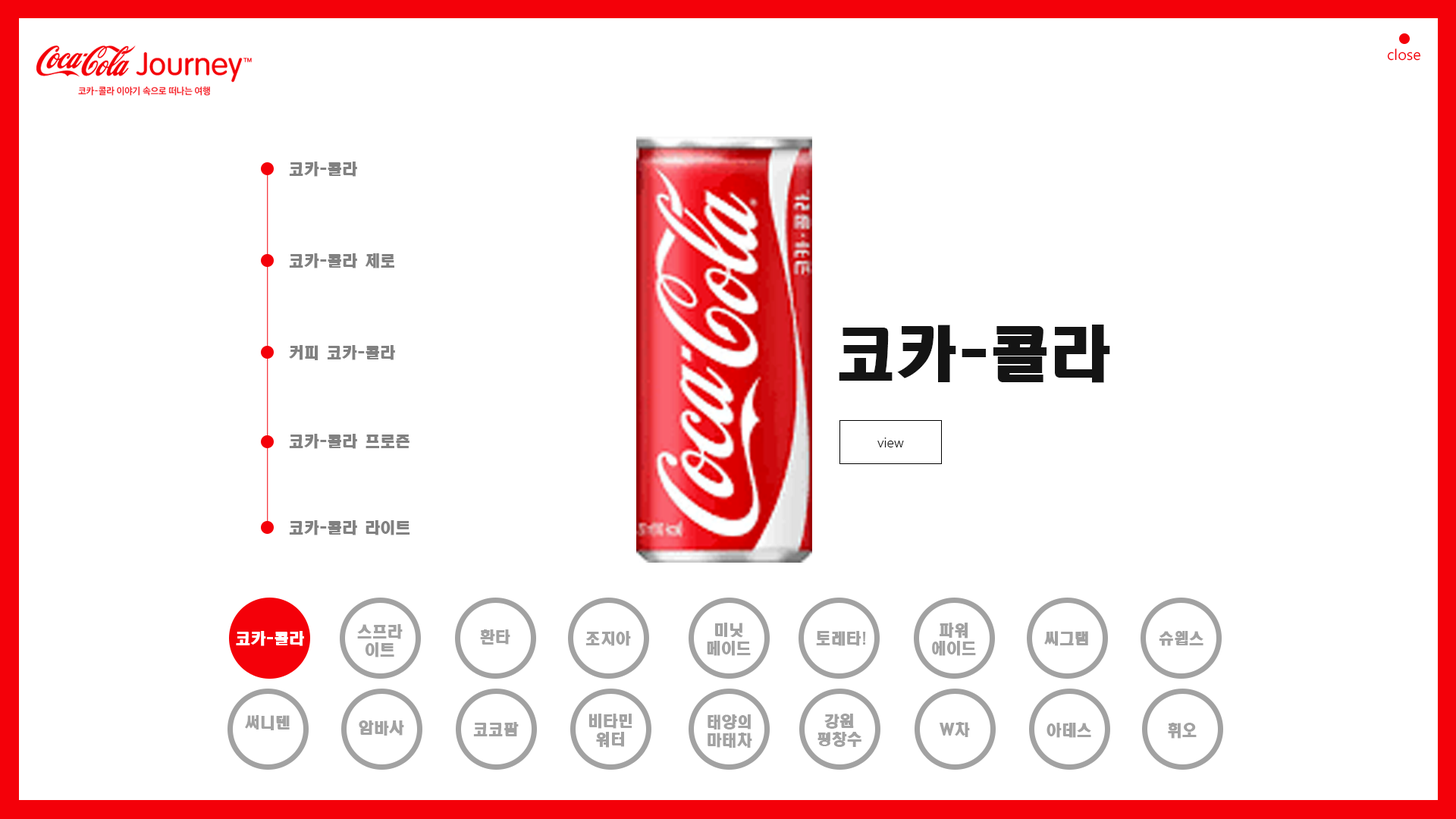
<style>
.page{position:relative;width:1456px;height:819px;background:#ffffff}
.page>*{position:absolute;margin:0}
.t1{font:15.2px "MicrosoftPhagsPa";color:#f40009}
.t2{font:15.2px "HeadlineR-HM";color:#818181}
.t3{font:60.7px "HeadlineR-HM";color:#141414}
.t4{font:13.6px "MalgunGothic-Semilight";color:#141414}
.t5{font:15.2px/18.2px "HeadlineR-HM";color:#a2a2a2}
.t6{font:15.2px "HeadlineR-HM";color:#a2a2a2}
.t7{font:15.2px "HeadlineR-HM";color:#ffffff}
</style>
<div class="page">
<p class="t1" style="left:1387px;top:49px;width:34px;height:12px">close</p>
<p class="t2" style="left:289px;top:162px;width:68px;height:15px">코카-콜라</p>
<p class="t2" style="left:289px;top:253px;width:105px;height:15px">코카-콜라 제로</p>
<p class="t3" style="left:839px;top:325px;width:271px;height:58px">코카-콜라</p>
<p class="t2" style="left:289px;top:345px;width:106px;height:15px">커피 코카-콜라</p>
<p class="t2" style="left:289px;top:434px;width:120px;height:15px">코카-콜라 프로즌</p>
<p class="t4" style="left:877px;top:438px;width:27px;height:9px">view</p>
<p class="t2" style="left:289px;top:520px;width:121px;height:15px">코카-콜라 라이트</p>
<p class="t5" style="left:357px;top:624px;width:46px;height:33px;text-align:center">스프라<br>이트</p>
<p class="t6" style="left:480px;top:629px;width:30px;height:16px">환타</p>
<p class="t5" style="left:707px;top:623px;width:44px;height:33px;text-align:center">미닛<br>메이드</p>
<p class="t5" style="left:932px;top:623px;width:44px;height:33px;text-align:center">파워<br>에이드</p>
<p class="t7" style="left:236px;top:631px;width:68px;height:15px">코카-콜라</p>
<p class="t6" style="left:585px;top:631px;width:46px;height:15px">조지아</p>
<p class="t6" style="left:816px;top:631px;width:50px;height:15px">토레타!</p>
<p class="t6" style="left:1044px;top:631px;width:44px;height:15px">씨그램</p>
<p class="t6" style="left:1159px;top:631px;width:44px;height:15px">슈웹스</p>
<p class="t5" style="left:588px;top:714px;width:44px;height:34px;text-align:center">비타민<br>워터</p>
<p class="t5" style="left:817px;top:714px;width:44px;height:33px;text-align:center">강원<br>평창수</p>
<p class="t6" style="left:245px;top:715px;width:45px;height:15px">써니텐</p>
<p class="t6" style="left:359px;top:720px;width:45px;height:16px">암바사</p>
<p class="t6" style="left:473px;top:722px;width:46px;height:14px">코코팜</p>
<p class="t5" style="left:708px;top:714px;width:44px;height:34px;text-align:center">태양의<br>마태차</p>
<p class="t6" style="left:939px;top:722px;width:31px;height:15px">W차</p>
<p class="t6" style="left:1046px;top:723px;width:45px;height:15px">아데스</p>
<p class="t6" style="left:1168px;top:723px;width:29px;height:16px">휘오</p>
</div>
